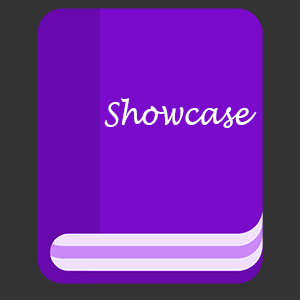
<style>
.page{position:relative;width:300px;height:300px;background:#7a0bcb}
.page>*{position:absolute;margin:0}
.t1{font:32px "LucidaHandwriting-Italic";color:#ffffff;scale:0.88 1}
.t2{font:45.1px "LucidaHandwriting-Italic";color:#ffffff;scale:0.88 1}
</style>
<div class="page">
<p class="t1" style="left:104px;top:98px;width:153px;height:30px">Showcase<br><span class="t2">K</span></p>
</div>
